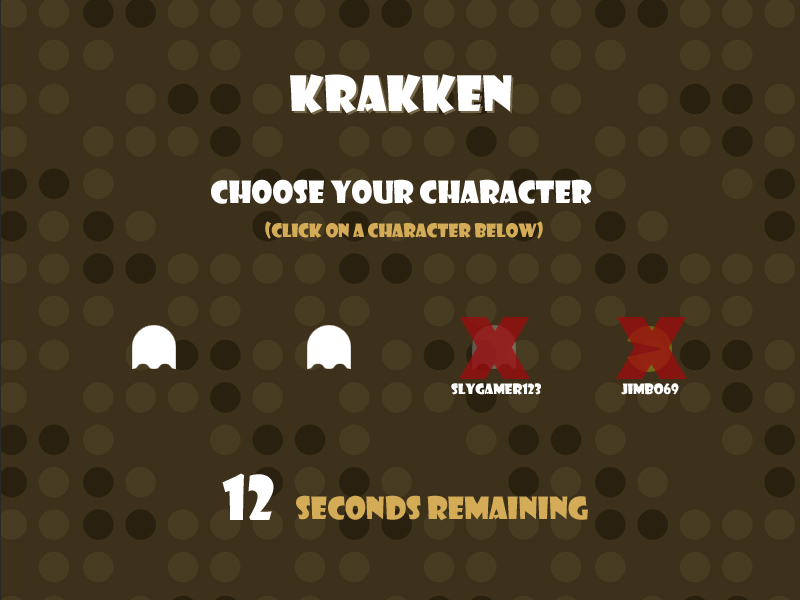
<style>
.page{position:relative;width:800px;height:600px;background:#3d311b}
.page>*{position:absolute;margin:0}
.t1{font:47.8px "ShowcardGothic-Reg";color:#ffffff}
.t2{font:29.9px "ShowcardGothic-Reg";color:#ffffff}
.t3{font:17.9px "ShowcardGothic-Reg";color:#d4ac57}
.t4{font:13.9px "ShowcardGothic-Reg";color:#ffffff}
.t5{font:59.8px "ShowcardGothic-Reg";color:#ffffff}
.t6{font:29.9px "ShowcardGothic-Reg";color:#d4ac57}
</style>
<div class="page">
<p class="t1" style="left:290px;top:74px;width:222px;height:40px">Krakken</p>
<p class="t1" style="left:292px;top:76px;width:222px;height:40px">Krakken</p>
<p class="t2" style="left:211px;top:179px;width:381px;height:26px">Choose your character</p>
<p class="t3" style="left:265px;top:221px;width:278px;height:18px">(Click on a character below)</p>
<p class="t4" style="left:451px;top:383px;width:90px;height:12px">slygamer123</p>
<p class="t4" style="left:621px;top:383px;width:58px;height:12px">Jimbo69</p>
<p class="t5" style="left:222px;top:473px;width:52px;height:47px">12</p>
<p class="t6" style="left:296px;top:495px;width:292px;height:26px">seconds remaining</p>
</div>
